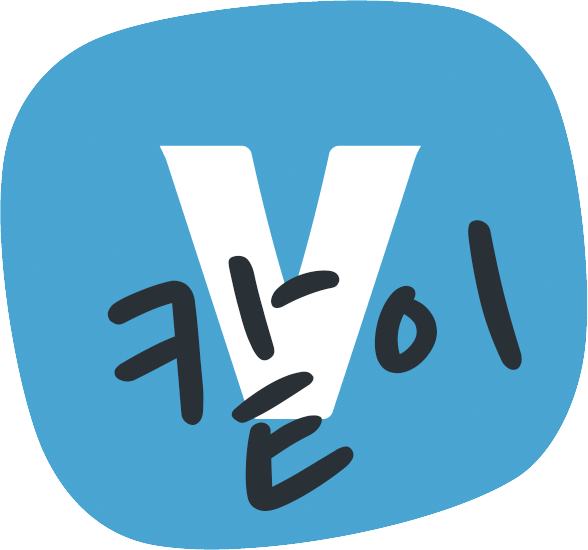
<style>
.page{position:relative;width:588px;height:550px;background:#49a4d2}
.page>*{position:absolute;margin:0}
.t1{font:350px "NanumPen";color:#2a3136}
</style>
<div class="page">
<p class="t1" style="left:107px;top:220px;width:415px;height:292px;rotate:-12deg">캍이</p>
</div>
